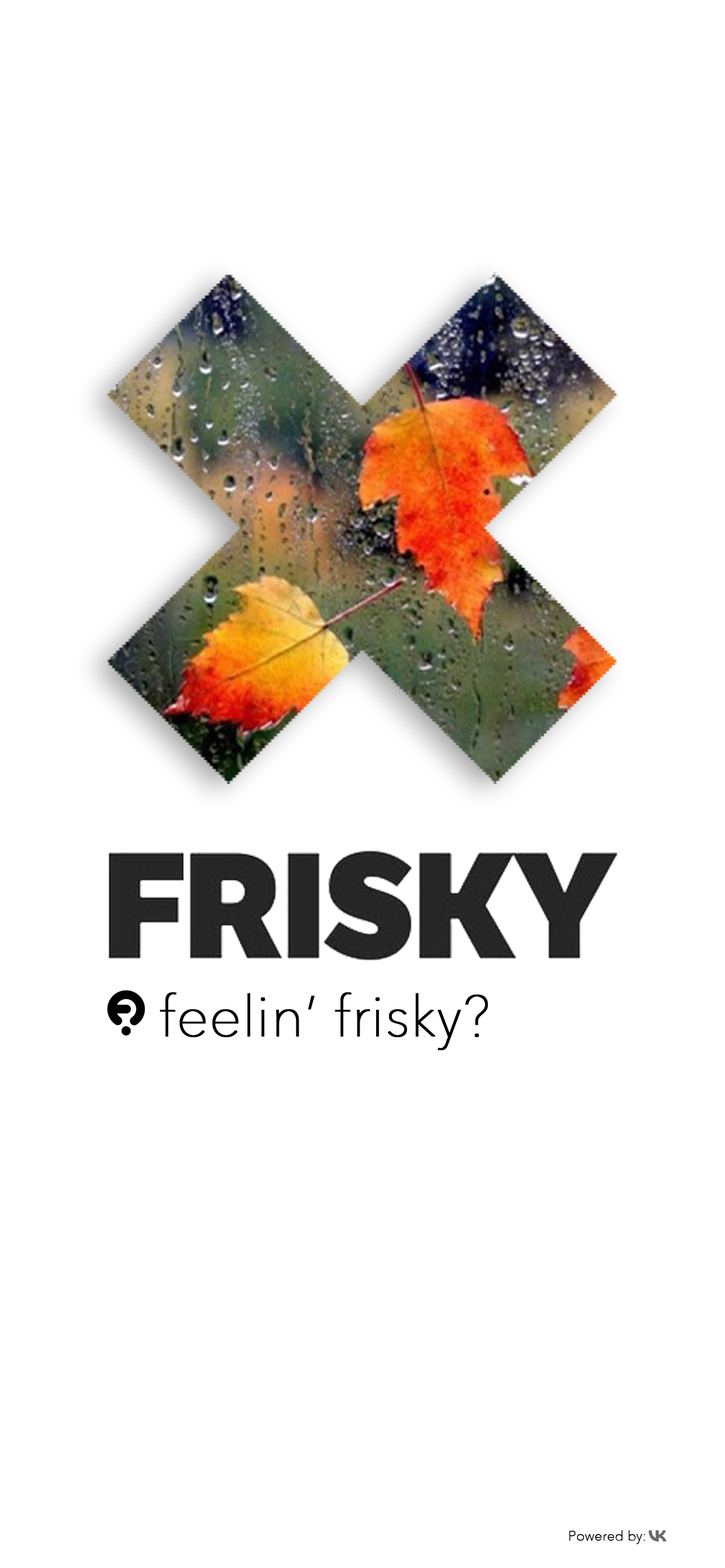
<style>
.page{position:relative;width:725px;height:1568px;background:#ffffff}
.page>*{position:absolute;margin:0}
.t1{font:56.4px "AvenirNext-UltraLight";color:#000000;font-weight:bold}
.t2{font:13.5px "AvenirNext-UltraLight";color:#000000;font-weight:bold}
</style>
<div class="page">
<p class="t1" style="left:160px;top:992px;width:328px;height:58px">feelin’ frisky?</p>
<p class="t2" style="left:569px;top:1530px;width:76px;height:14px">Powered by:</p>
</div>
